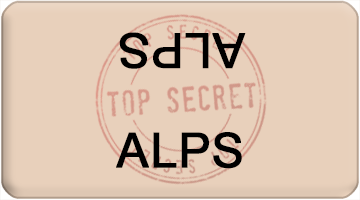
<style>
.page{position:relative;width:360px;height:200px;background:#e8d0bb}
.page>*{position:absolute;margin:0}
.t1{font:48px "ArialMT";color:#000000;font-weight:bold}
</style>
<div class="page">
<p class="t1" style="left:119px;top:32px;width:127px;height:37px;rotate:180deg">ALPS</p>
<p class="t1" style="left:116px;top:132px;width:126px;height:37px">ALPS</p>
</div>
